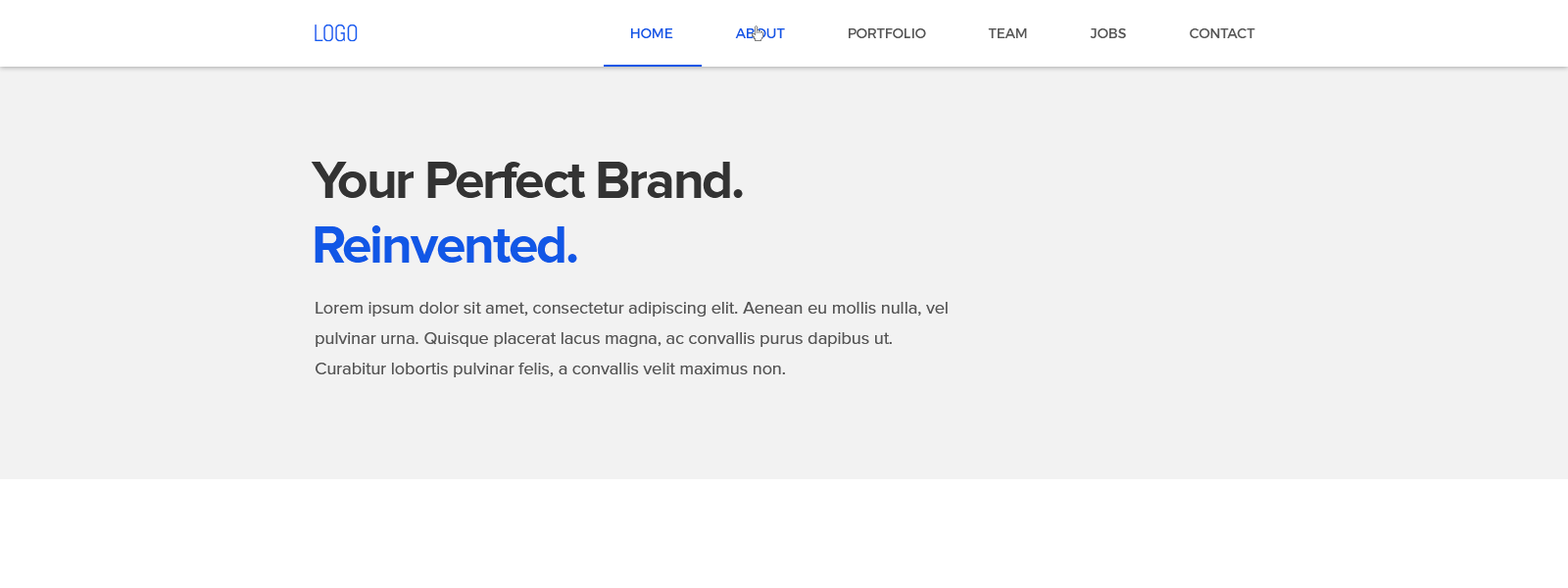
<style>
.page{position:relative;width:1568px;height:588px;background:#f2f2f2}
.page>*{position:absolute;margin:0}
.t1{font:23.5px "Abel-Regular";letter-spacing:-0.04em;color:#165ef0;text-transform:uppercase}
.t2{font:13.7px "Montserrat-Regular";color:#555555;text-transform:uppercase}
.t3{font:13.7px "Montserrat-Regular";color:#1157e6;text-transform:uppercase}
.t4{font:53.9px "ProximaNova-Bold";letter-spacing:-0.04em;color:#333333}
.t5{font:53.9px "ProximaNova-Bold";letter-spacing:-0.04em;color:#1157e6}
.t6{font:17.6px/30.4px "ProximaNova-Regular";color:#555555}
</style>
<div class="page">
<p class="t1" style="left:315px;top:24px;width:43px;height:18px">Logo</p>
<p class="t2" style="left:631px;top:28px;width:624px;height:10px"><span class="t3">Home                About</span>                Portfolio                Team                Jobs                Contact</p>
<p class="t4" style="left:311px;top:162px;width:432px;height:101px">Your Perfect Brand.<br><span class="t5">Reinvented.</span></p>
<p class="t6" style="left:316px;top:302px;width:632px;height:75px">Lorem ipsum dolor sit amet, consectetur adipiscing elit. Aenean eu mollis nulla, vel pulvinar urna. Quisque placerat lacus magna, ac convallis purus dapibus ut. Curabitur lobortis pulvinar felis, a convallis velit maximus non.</p>
</div>
